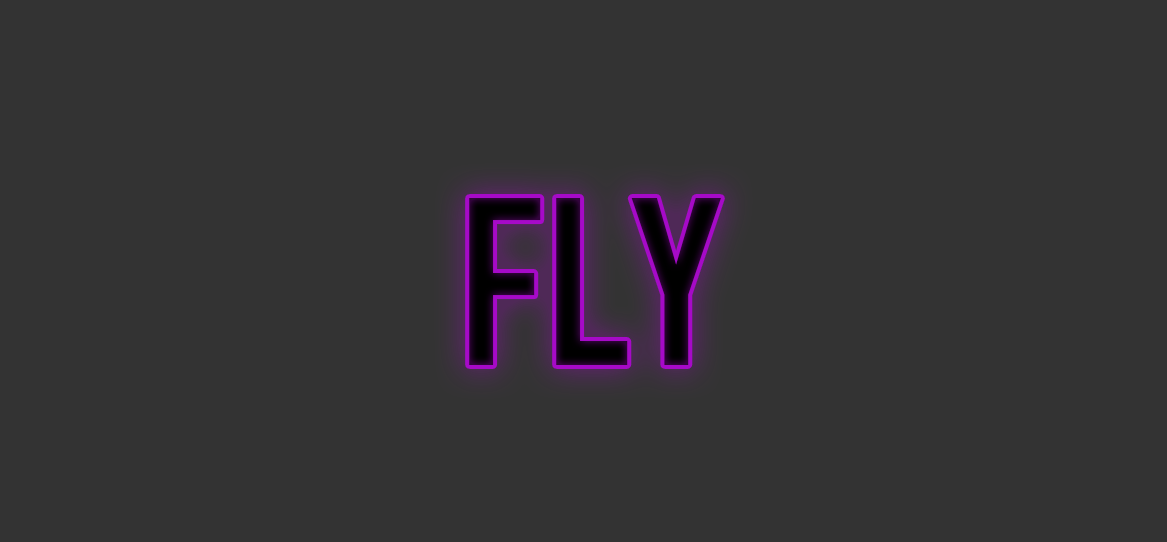
<style>
.page{position:relative;width:1167px;height:542px;background:#333333}
.page>*{position:absolute;margin:0}
.t1{font:233.7px "DINEngschrift";color:#09010b}
</style>
<div class="page">
<p class="t1" style="left:469px;top:198px;width:252px;height:167px">FLY</p>
</div>
